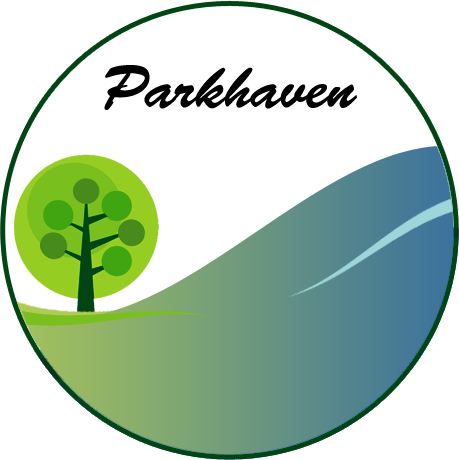
<style>
.page{position:relative;width:459px;height:460px;background:#ffffff}
.page>*{position:absolute;margin:0}
.t1{font:60px "BrushScriptStd";color:#000000}
</style>
<div class="page">
<p class="t1" style="left:104px;top:65px;width:253px;height:45px">Parkhaven</p>
</div>
